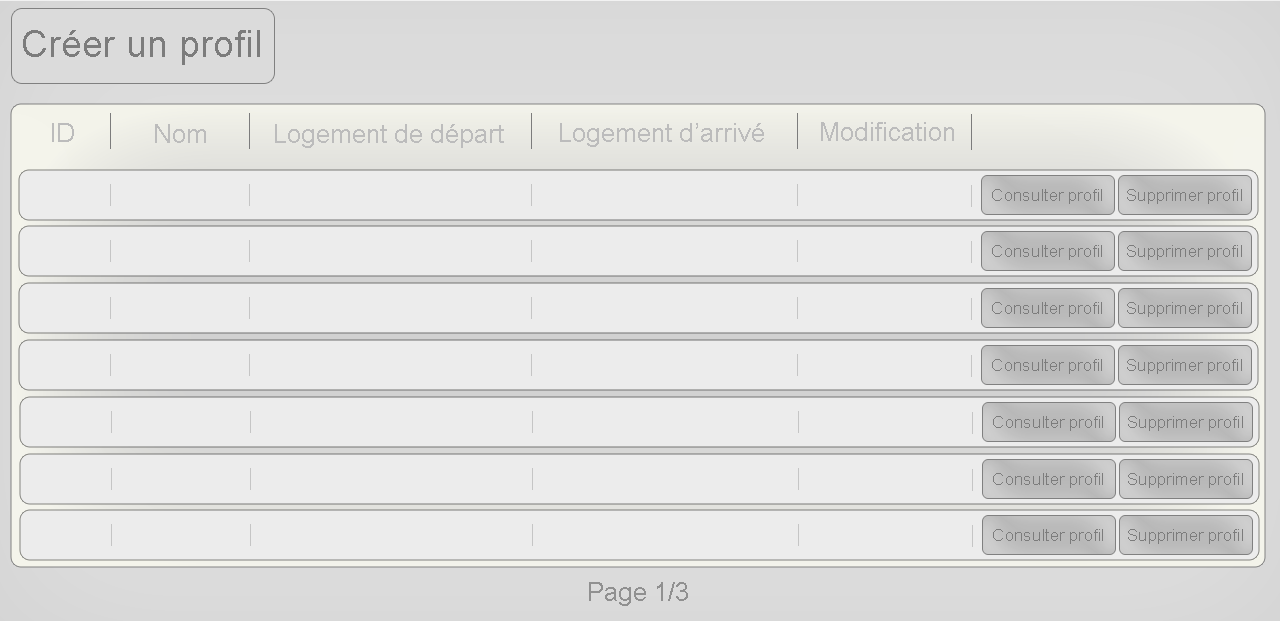
<style>
.page{position:relative;width:1280px;height:621px;background:#ececec}
.page>*{position:absolute;margin:0}
.t1{font:38px "ArialMT";color:#7c7c7c}
.t2{font:26px "ArialMT";color:#bcbcbc}
.t3{font:17.3px "ArialMT";color:#7c7c7c}
.t4{font:26px "ArialMT";color:#909090}
</style>
<div class="page">
<p class="t1" style="left:23px;top:30px;width:237px;height:35px">Créer un profil</p>
<p class="t2" style="left:52px;top:123px;width:22px;height:19px">ID</p>
<p class="t2" style="left:155px;top:124px;width:51px;height:19px">Nom</p>
<p class="t2" style="left:275px;top:124px;width:229px;height:24px">Logement de départ</p>
<p class="t2" style="left:560px;top:123px;width:204px;height:24px">Logement d’arrivé</p>
<p class="t2" style="left:821px;top:122px;width:133px;height:19px">Modification</p>
<p class="t3" style="left:992px;top:189px;width:110px;height:15px">Consulter profil</p>
<p class="t3" style="left:1127px;top:189px;width:115px;height:15px">Supprimer profil</p>
<p class="t3" style="left:992px;top:245px;width:110px;height:15px">Consulter profil</p>
<p class="t3" style="left:1127px;top:245px;width:115px;height:15px">Supprimer profil</p>
<p class="t3" style="left:992px;top:302px;width:110px;height:15px">Consulter profil</p>
<p class="t3" style="left:1127px;top:302px;width:115px;height:15px">Supprimer profil</p>
<p class="t3" style="left:992px;top:359px;width:110px;height:15px">Consulter profil</p>
<p class="t3" style="left:1127px;top:359px;width:115px;height:15px">Supprimer profil</p>
<p class="t3" style="left:993px;top:416px;width:110px;height:15px">Consulter profil</p>
<p class="t3" style="left:1128px;top:416px;width:115px;height:15px">Supprimer profil</p>
<p class="t3" style="left:993px;top:473px;width:110px;height:15px">Consulter profil</p>
<p class="t3" style="left:1128px;top:473px;width:115px;height:15px">Supprimer profil</p>
<p class="t3" style="left:993px;top:529px;width:110px;height:15px">Consulter profil</p>
<p class="t3" style="left:1128px;top:529px;width:115px;height:15px">Supprimer profil</p>
<p class="t4" style="left:589px;top:582px;width:99px;height:24px">Page 1/3</p>
</div>
